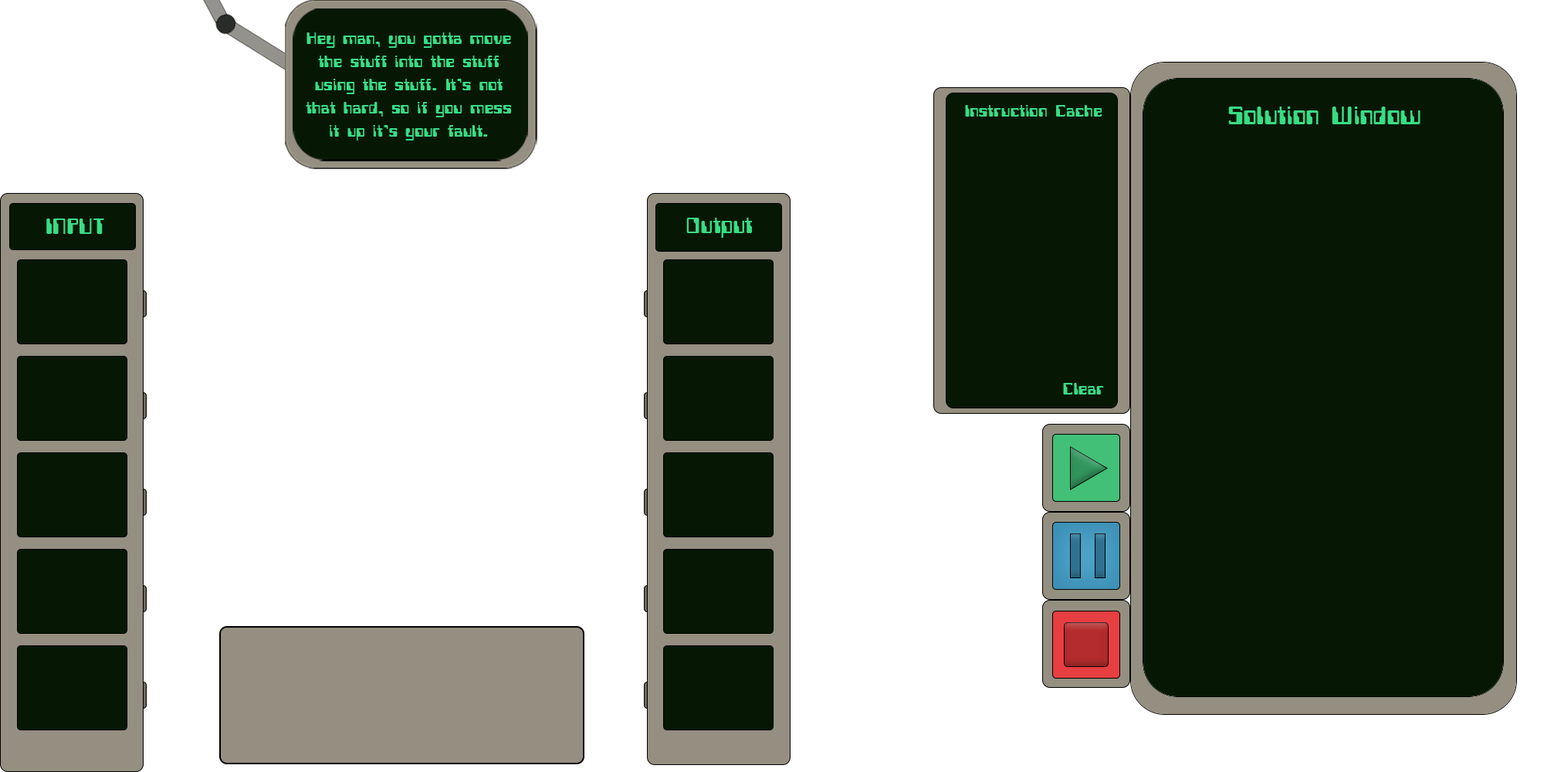
<style>
.page{position:relative;width:1544px;height:772px;background:#ffffff}
.page>*{position:absolute;margin:0}
.t1{font:19.3px "Computerfont";color:#37dd85}
.t2{font:29px "Computerfont";color:#37dd85}
.t3{font:25.7px "Computerfont";color:#37dd85}
</style>
<div class="page">
<p class="t1" style="left:306px;top:32px;width:205px;height:109px;text-align:center">Hey man, you gotta move the stuff into the stuff using the stuff. It's not that hard, so if you mess it up it's your fault.</p>
<p class="t1" style="left:965px;top:105px;width:137px;height:12px">Instruction Cache</p>
<p class="t2" style="left:1228px;top:107px;width:193px;height:17px">Solution Window</p>
<p class="t3" style="left:46px;top:219px;width:58px;height:15px">INPUT</p>
<p class="t3" style="left:686px;top:218px;width:66px;height:20px">Output</p>
<p class="t1" style="left:1063px;top:383px;width:41px;height:12px">Clear</p>
</div>
